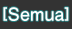
<style>
.page{position:relative;width:72px;height:29px;background:#333333}
.page>*{position:absolute;margin:0}
.t1{font:18px "FutoGoB101Pr5-Bold";color:#ffffff}
.t2{font:14.9px "FutoGoB101Pr5-Bold";color:#ffffff;scale:1.2 1}
</style>
<div class="page">
<p class="t1" style="left:3px;top:7px;width:66px;height:14px"><span class="t2">[</span>Semua<span class="t2">]</span></p>
</div>
